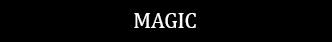
<style>
.page{position:relative;width:332px;height:42px;background:#000000}
.page>*{position:absolute;margin:0}
.t1{font:21.7px "Cambria";color:#ffffff}
</style>
<div class="page">
<p class="t1" style="left:134px;top:13px;width:62px;height:15px">MAGIC</p>
</div>
